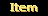
<style>
.page{position:relative;width:48px;height:16px;background:#000000}
.page>*{position:absolute;margin:0}
.t1{font:11px "Meiryo";color:#f0f080;font-weight:bold}
</style>
<div class="page">
<p class="t1" style="left:10px;top:3px;width:27px;height:8px">Item</p>
</div>
